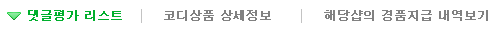
<style>
.page{position:relative;width:500px;height:30px;background:#ffffff}
.page>*{position:absolute;margin:0}
.t1{font:12px "Dotum";color:#00af2d;font-weight:bold}
.t2{font:12px "Dotum";color:#818181;font-weight:bold}
</style>
<div class="page">
<p class="t1" style="left:28px;top:10px;width:94px;height:11px">댓글평가 리스트</p>
<p class="t2" style="left:164px;top:10px;width:107px;height:11px">코디상품 상세정보</p>
<p class="t2" style="left:324px;top:10px;width:164px;height:11px">해당샵의 경품지급 내역보기</p>
</div>
